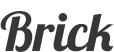
<style>
.page{position:relative;width:114px;height:52px;background:#ffffff}
.page>*{position:absolute;margin:0}
.t1{font:53.4px "Lobster";color:#383737}
</style>
<div class="page">
<p class="t1" style="left:0px;top:11px;width:114px;height:41px">Brick</p>
</div>
